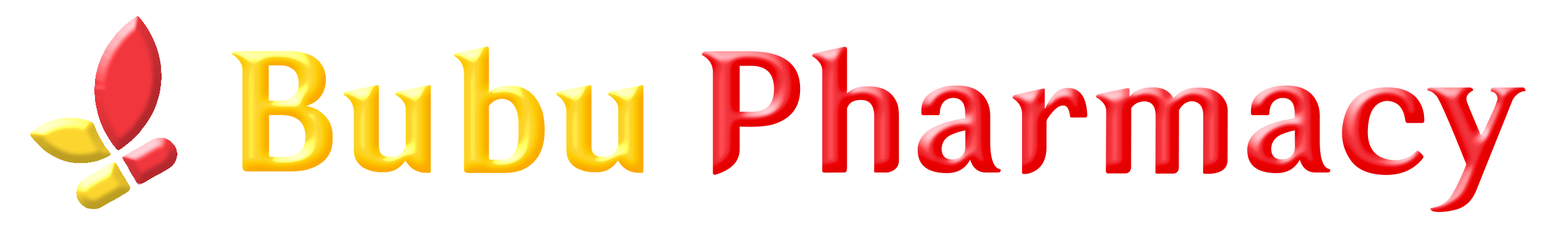
<style>
.page{position:relative;width:1568px;height:226px;background:#ffffff}
.page>*{position:absolute;margin:0}
.t1{font:153.6px "HYWenHei-HEW"}
</style>
<div class="page">
<p class="t1" style="left:231px;top:47px;width:1295px;height:165px">Bubu Pharmacy</p>
</div>
